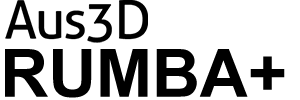
<style>
.page{position:relative;width:300px;height:100px;background:#ffffff}
.page>*{position:absolute;margin:0}
.t1{font:66.7px "Arial-BoldMT";color:#000000}
</style>
<div class="page">
<p class="t1" style="left:5px;top:49px;width:280px;height:49px">RUMBA+</p>
</div>
